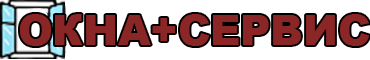
<style>
.page{position:relative;width:370px;height:60px;background:#ffffff}
.page>*{position:absolute;margin:0}
.t1{font:41.7px "Arial-Black";color:#8a2626}
</style>
<div class="page">
<p class="t1" style="left:20px;top:14px;width:350px;height:32px">ОКНА+СЕРВИС</p>
</div>
